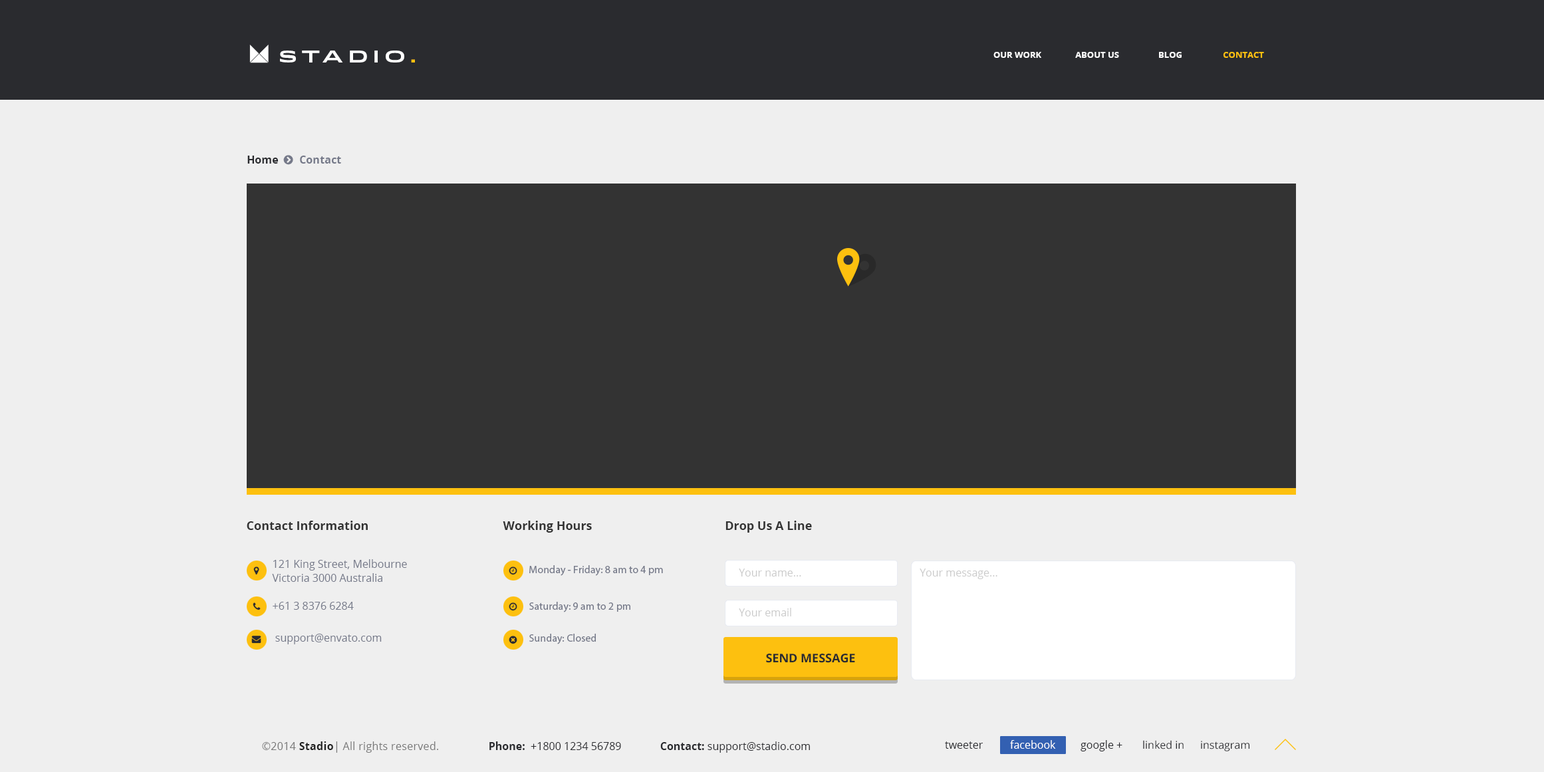
<style>
.page{position:relative;width:1544px;height:772px;background:#efefef}
.page>*{position:absolute;margin:0}
.t1{font:16px "Idlewild-Bold";letter-spacing:0.3em;color:#ffffff;text-transform:uppercase}
.t2{font:16px "Idlewild-Bold";letter-spacing:0.3em;color:#fdc00f;text-transform:uppercase}
.t3{font:8.6px "OpenSans-Bold";color:#ffffff;text-transform:uppercase}
.t4{font:8.6px "OpenSans-Bold";color:#fdc00f;text-transform:uppercase}
.t5{font:10.6px "OpenSans-Bold";color:#757989}
.t6{font:10.6px "OpenSans-Bold";color:#2a2b2f}
.t7{font:12px "OpenSans-Bold";color:#333333}
.t8{font:10.6px/14.2px "OpenSans";color:#757989}
.t9{font:10.6px "MyriadPro-Regular";color:#757989}
.t10{font:10.6px "OpenSans";color:#cccccc}
.t11{font:10.6px "OpenSans";color:#757989}
.t12{font:12px "OpenSans-Bold";color:#2a2b2f;text-transform:uppercase}
.t13{font:10.6px "OpenSans";letter-spacing:0.02em;color:#787878}
.t14{font:10.6px "OpenSans-Bold";letter-spacing:0.02em;color:#222222}
.t15{font:10.6px "OpenSans";color:#2a2b2f}
.t16{font:10.6px "OpenSans";color:#ffffff}
</style>
<div class="page">
<p class="t1" style="left:280px;top:51px;width:135px;height:12px">stAdio<span class="t2">.</span></p>
<p class="t3" style="left:994px;top:52px;width:48px;height:6px">our work</p>
<p class="t3" style="left:1075px;top:52px;width:44px;height:6px">About us</p>
<p class="t3" style="left:1159px;top:52px;width:23px;height:6px">BLOG</p>
<p class="t4" style="left:1223px;top:52px;width:41px;height:6px">Contact</p>
<p class="t5" style="left:247px;top:156px;width:94px;height:8px"><span class="t6">Home        </span>Contact</p>
<p class="t7" style="left:247px;top:521px;width:121px;height:9px">Contact Information</p>
<p class="t7" style="left:503px;top:521px;width:89px;height:12px">Working Hours</p>
<p class="t7" style="left:726px;top:521px;width:86px;height:12px">Drop Us A Line</p>
<p class="t8" style="left:272px;top:559px;width:135px;height:23px">121 King Street, Melbourne <br>Victoria 3000 Australia</p>
<p class="t9" style="left:529px;top:565px;width:134px;height:11px">Monday - Friday: 8 am to 4 pm</p>
<p class="t10" style="left:739px;top:569px;width:62px;height:8px">Your name...</p>
<p class="t10" style="left:920px;top:569px;width:78px;height:10px">Your message...</p>
<p class="t11" style="left:273px;top:602px;width:81px;height:8px">+61 3 8376 6284</p>
<p class="t9" style="left:529px;top:602px;width:101px;height:11px">Saturday: 9 am to 2 pm</p>
<p class="t10" style="left:739px;top:608px;width:52px;height:9px">Your email</p>
<p class="t11" style="left:275px;top:634px;width:107px;height:10px">support@envato.com</p>
<p class="t9" style="left:529px;top:634px;width:67px;height:10px">Sunday: Closed</p>
<p class="t12" style="left:766px;top:654px;width:89px;height:9px">SEND MESSAGE</p>
<p class="t13" style="left:262px;top:742px;width:176px;height:11px">©2014 <span class="t14">Stadio</span>| All rights reserved.</p>
<p class="t15" style="left:489px;top:742px;width:321px;height:11px"><span class="t6">Phone:</span>  +1800 1234 56789              <span class="t6">Contact:</span> support@stadio.com</p>
<p class="t15" style="left:945px;top:742px;width:38px;height:7px">tweeter</p>
<p class="t16" style="left:1010px;top:740px;width:46px;height:9px">facebook</p>
<p class="t15" style="left:1081px;top:740px;width:42px;height:12px">google +</p>
<p class="t15" style="left:1143px;top:740px;width:41px;height:10px">linked in</p>
<p class="t15" style="left:1201px;top:741px;width:49px;height:11px">instagram</p>
</div>
